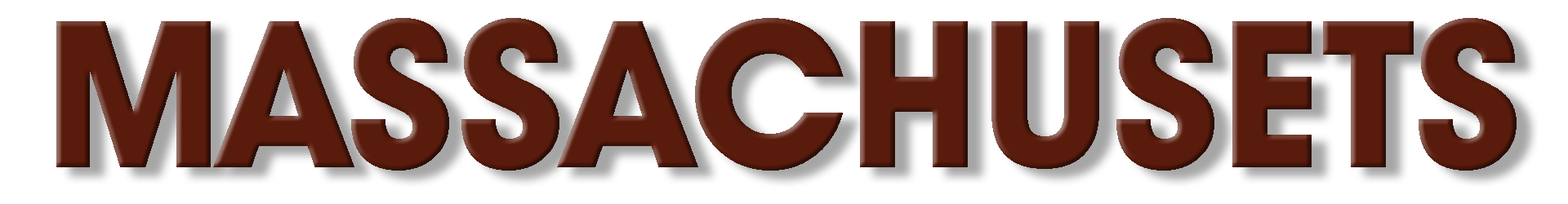
<style>
.page{position:relative;width:1568px;height:204px;background:#ffffff}
.page>*{position:absolute;margin:0}
.t1{font:205.8px "AWPCAvantGuardBold";color:#591b0c}
</style>
<div class="page">
<p class="t1" style="left:56px;top:18px;width:1461px;height:153px">MASSACHUSETSS</p>
</div>
